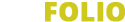
<style>
.page{position:relative;width:125px;height:22px;background:#ffffff}
.page>*{position:absolute;margin:0}
.t1{font:26.2px "OpenSans-Extrabold";color:#cfc91d;text-transform:uppercase;font-weight:bold}
.t2{font:26.2px "OpenSans-Extrabold";color:#ffffff;text-transform:uppercase;font-weight:bold}
</style>
<div class="page">
<p class="t1" style="left:1px;top:2px;width:124px;height:20px"><span class="t2">MY</span>FOLIO</p>
</div>
